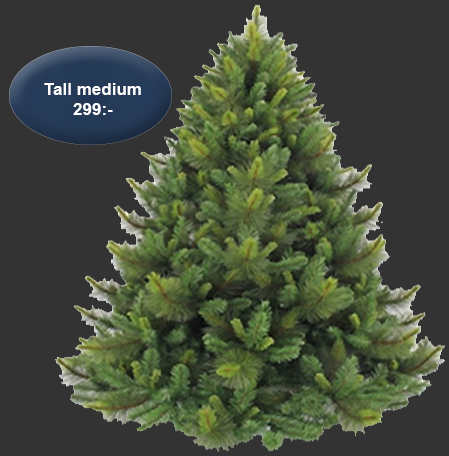
<style>
.page{position:relative;width:449px;height:456px;background:#333333}
.page>*{position:absolute;margin:0}
.t1{font:17px "Arial-BoldMT";color:#ffffff}
</style>
<div class="page">
<p class="t1" style="left:44px;top:83px;width:97px;height:32px;text-align:center">Tall medium<br>299:-</p>
</div>
